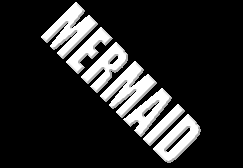
<style>
.page{position:relative;width:243px;height:168px;background:#000000}
.page>*{position:absolute;margin:0}
.t1{font:63.6px "Impact";color:#ffffff;scale:0.78 1}
</style>
<div class="page">
<p class="t1" style="left:41px;top:2px;width:160px;height:161px;rotate:45deg">MERMAID</p>
</div>
